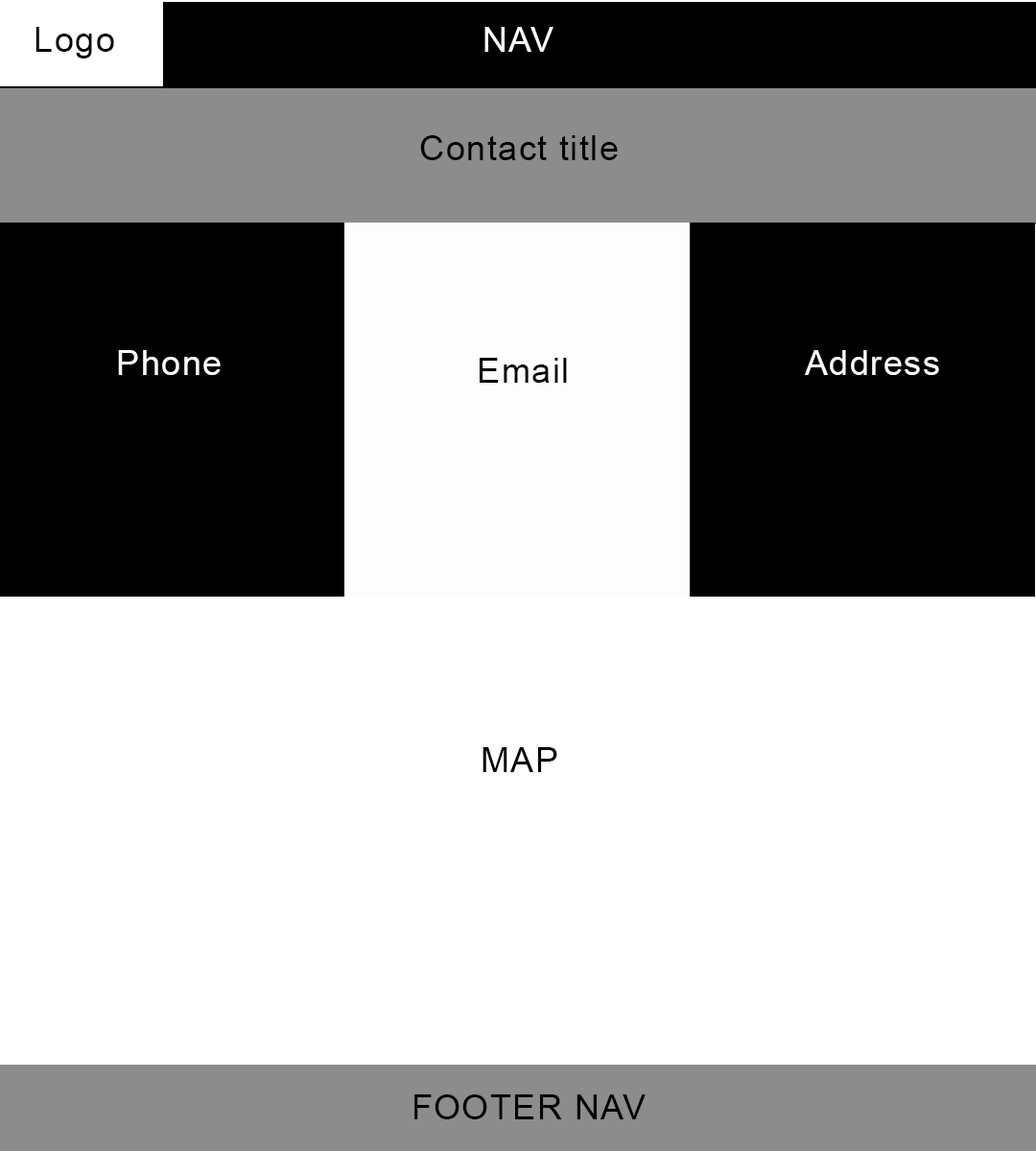
<style>
.page{position:relative;width:1036px;height:1151px;background:#ffffff}
.page>*{position:absolute;margin:0}
.t1{font:34.5px "ArialMT";letter-spacing:0.04em;color:#000000}
.t2{font:34.5px "ArialMT";letter-spacing:0.04em;color:#ffffff}
</style>
<div class="page">
<p class="t1" style="left:35px;top:27px;width:79px;height:32px">Logo</p>
<p class="t2" style="left:484px;top:27px;width:69px;height:25px">NAV</p>
<p class="t1" style="left:420px;top:135px;width:198px;height:25px">Contact title</p>
<p class="t2" style="left:118px;top:350px;width:103px;height:25px">Phone</p>
<p class="t2" style="left:805px;top:350px;width:134px;height:25px">Address</p>
<p class="t1" style="left:480px;top:358px;width:87px;height:25px">Email</p>
<p class="t1" style="left:482px;top:747px;width:75px;height:25px">MAP</p>
<p class="t1" style="left:414px;top:1094px;width:232px;height:25px">FOOTER NAV</p>
</div>
